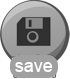
<style>
.page{position:relative;width:70px;height:79px;background:#ffffff}
.page>*{position:absolute;margin:0}
.t1{font:18px "ArialMT";color:#ffffff}
</style>
<div class="page">
<p class="t1" style="left:15px;top:62px;width:38px;height:10px">save</p>
</div>
